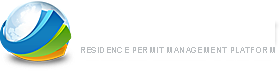
<style>
.page{position:relative;width:280px;height:71px;background:#ffffff}
.page>*{position:absolute;margin:0}
.t1{font:8px "ArialMT";letter-spacing:0.05em;color:#b8bcbf}
</style>
<div class="page">
<p class="t1" style="left:81px;top:47px;width:194px;height:6px">RESIDENCE PERMIT MANAGEMENT PLATFORM</p>
</div>
